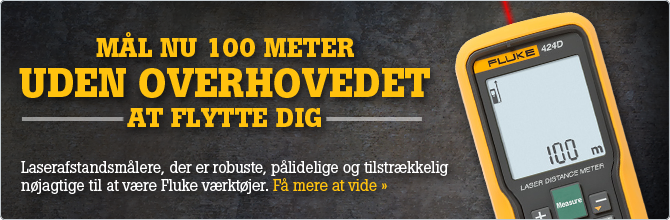
<style>
.page{position:relative;width:670px;height:220px}
.page>*{position:absolute;margin:0}
.t1{font:26.8px/44.8px "BotonPro-Bold";color:#ffc20e;text-transform:uppercase}
.t2{font:40px/40px "BotonPro-Bold";color:#ffc20e;text-transform:uppercase}
.t3{font:26.8px/30px "BotonPro-Bold";color:#ffc20e;text-transform:uppercase}
.t4{font:16px/18px "BotonPro-Regular";letter-spacing:-0.012em;color:#ffffff}
.t5{font:16px/18px "BotonPro-Regular";letter-spacing:-0.012em;color:#ffc20e}
</style>
<div class="page">
<p class="t1" style="left:19px;top:32px;width:411px;height:95px;text-align:center">Mål nu 100 meter <br><span class="t2">uden overhovedet <br></span><span class="t3">at flytte dig</span></p>
<p class="t4" style="left:21px;top:160px;width:428px;height:34px">Laserafstandsmålere, der er robuste, pålidelige og tilstrækkelig nøjagtige til at være Fluke værktøjer. <span class="t5">Få mere at vide »</span></p>
</div>
